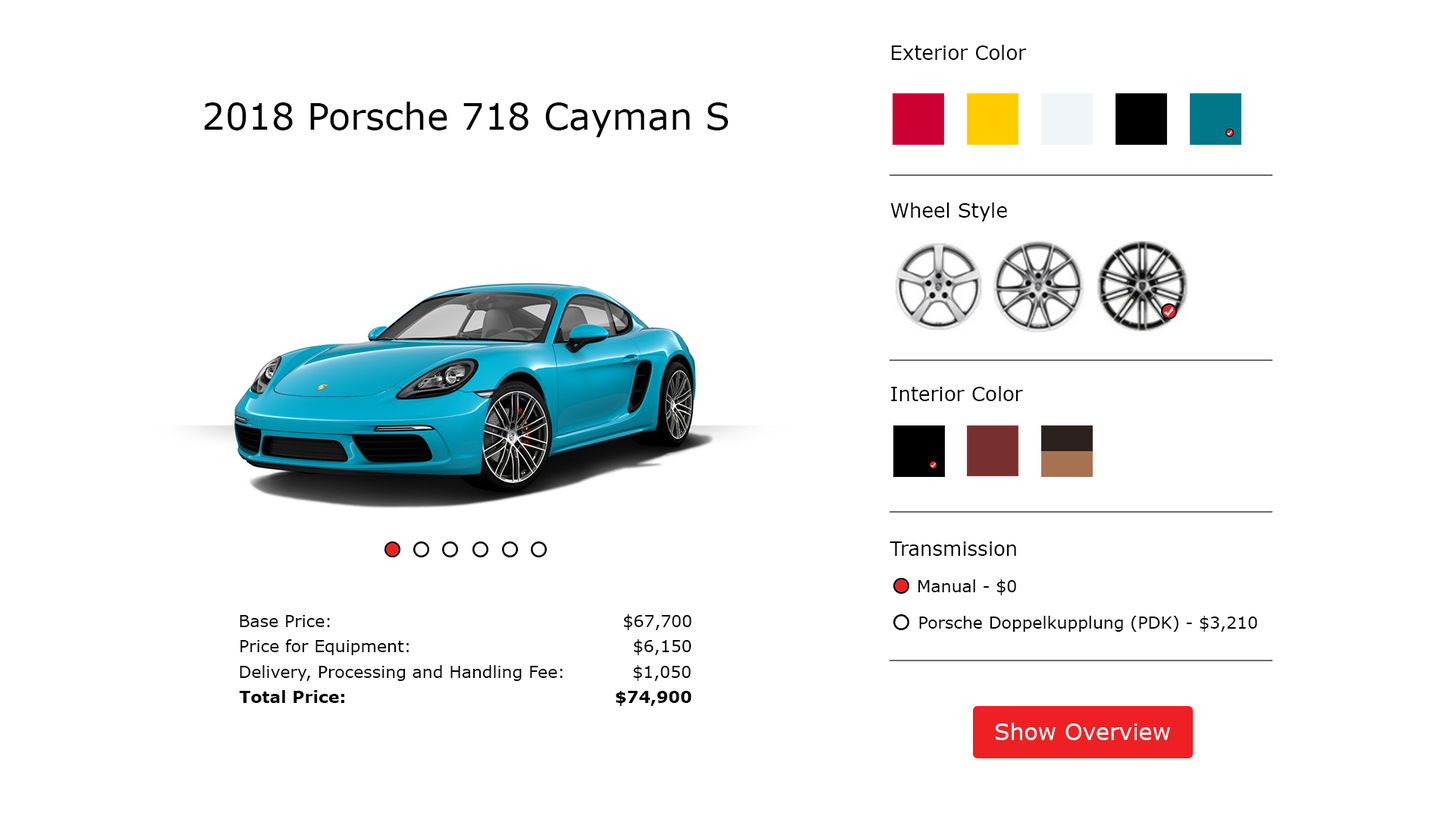
<style>
.page{position:relative;width:1456px;height:819px;background:#ffffff}
.page>*{position:absolute;margin:0}
.t1{font:19.7px "Verdana";color:#000000}
.t2{font:36.4px "Verdana";color:#000000}
.t3{font:16.7px "Verdana";color:#000000}
.t4{font:16.7px "Verdana-Bold";color:#000000}
</style>
<div class="page">
<p class="t1" style="left:892px;top:45px;width:135px;height:15px">Exterior Color</p>
<p class="t2" style="left:204px;top:102px;width:524px;height:35px">2018 Porsche 718 Cayman S</p>
<p class="t1" style="left:890px;top:202px;width:117px;height:19px">Wheel Style</p>
<p class="t1" style="left:891px;top:386px;width:132px;height:15px">Interior Color</p>
<p class="t1" style="left:890px;top:541px;width:126px;height:15px">Transmission</p>
<p class="t3" style="left:918px;top:579px;width:98px;height:16px">Manual - $0</p>
<p class="t3" style="left:240px;top:614px;width:452px;height:16px">Base Price:               $67,700</p>
<p class="t3" style="left:919px;top:616px;width:338px;height:16px">Porsche Doppelkupplung (PDK) - $3,210</p>
<p class="t3" style="left:240px;top:639px;width:452px;height:16px">Price for Equipment:          $6,150</p>
<p class="t3" style="left:240px;top:665px;width:451px;height:16px">Delivery, Processing and Handling Fee:     $1,050</p>
<p class="t4" style="left:239px;top:690px;width:453px;height:16px">Total Price:                         $74,900</p>
</div>
